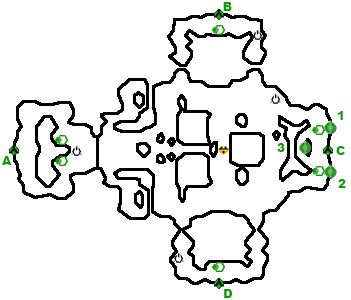
<style>
.page{position:relative;width:351px;height:300px;background:#ffffff}
.page>*{position:absolute;margin:0}
.t1{font:12px "Arial-Black";color:#0d9e01}
</style>
<div class="page">
<p class="t1" style="left:223px;top:2px;width:9px;height:9px">B</p>
<p class="t1" style="left:338px;top:111px;width:5px;height:9px">1</p>
<p class="t1" style="left:277px;top:143px;width:8px;height:9px">3</p>
<p class="t1" style="left:336px;top:146px;width:9px;height:9px">C</p>
<p class="t1" style="left:2px;top:156px;width:10px;height:9px">A</p>
<p class="t1" style="left:338px;top:179px;width:8px;height:9px">2</p>
<p class="t1" style="left:224px;top:289px;width:8px;height:9px">D</p>
</div>
